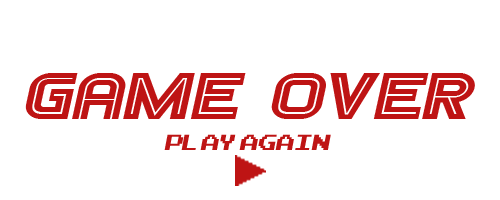
<style>
.page{position:relative;width:500px;height:200px;background:#ffffff}
.page>*{position:absolute;margin:0}
.t1{font:65.7px "Games";color:#be1414;font-style:italic;scale:1.25 1}
.t2{font:30px "ArcadeClassic";color:#be1414;font-style:italic;scale:1.08 1}
</style>
<div class="page">
<p class="t1" style="left:25px;top:73px;width:450px;height:46px">Game Over</p>
<p class="t2" style="left:164px;top:134px;width:167px;height:16px">play again</p>
</div>
